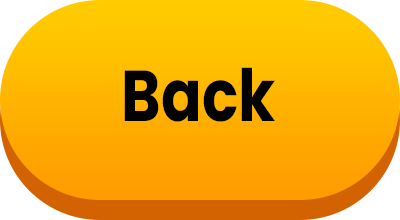
<style>
.page{position:relative;width:400px;height:220px}
.page>*{position:absolute;margin:0}
.t1{font:72px "Poppins-Bold";color:#000000;scale:0.83 1}
</style>
<div class="page">
<p class="t1" style="left:124px;top:67px;width:151px;height:55px">Back</p>
</div>
